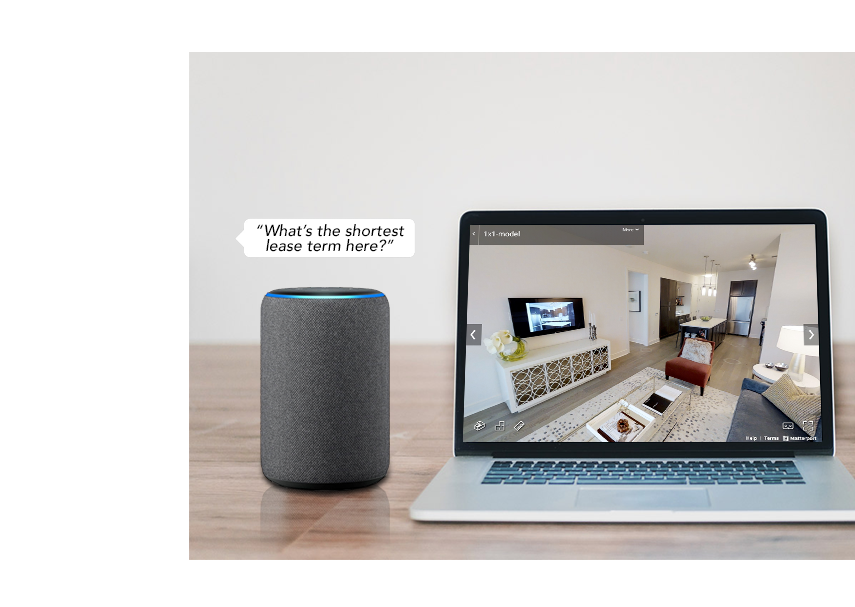
<style>
.page{position:relative;width:855px;height:607px;background:#ffffff}
.page>*{position:absolute;margin:0}
.t1{font:16px/14.6px "Avenir-MediumOblique";color:#000000}
</style>
<div class="page">
<p class="t1" style="left:257px;top:224px;width:148px;height:28px;text-align:center">“What’s the shortest<br>lease term here?”</p>
</div>
